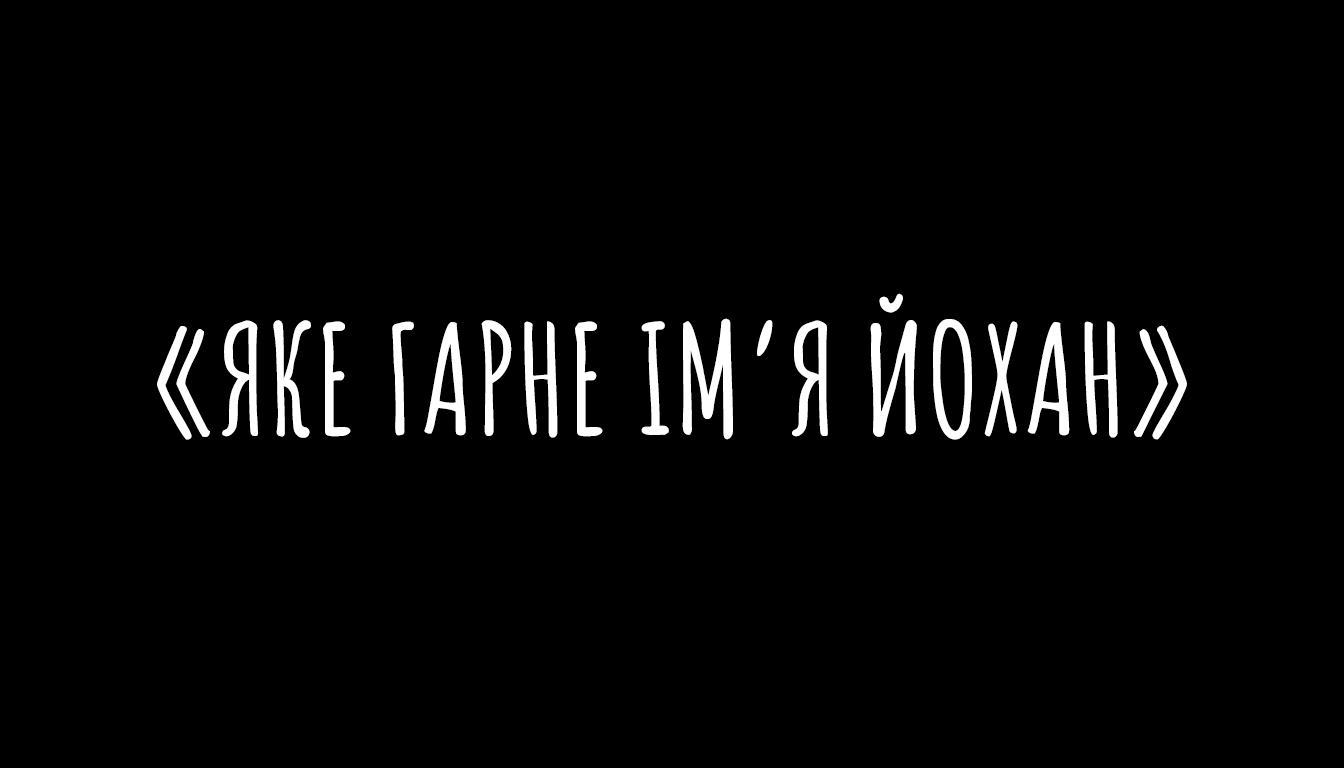
<style>
.page{position:relative;width:1344px;height:768px;background:#000000}
.page>*{position:absolute;margin:0}
.t1{font:150px "AmaticSC-Bold";color:#ffffff}
</style>
<div class="page">
<p class="t1" style="left:157px;top:293px;width:1030px;height:147px">«ЯКЕ ГАРНЕ ІМ’Я ЙОХАН»</p>
</div>
